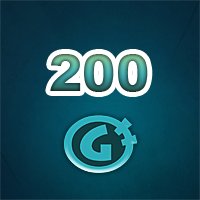
<style>
.page{position:relative;width:200px;height:200px}
.page>*{position:absolute;margin:0}
.t1{font:50px "Arial-Black"}
</style>
<div class="page">
<p class="t1" style="left:50px;top:54px;width:98px;height:38px">200</p>
</div>
